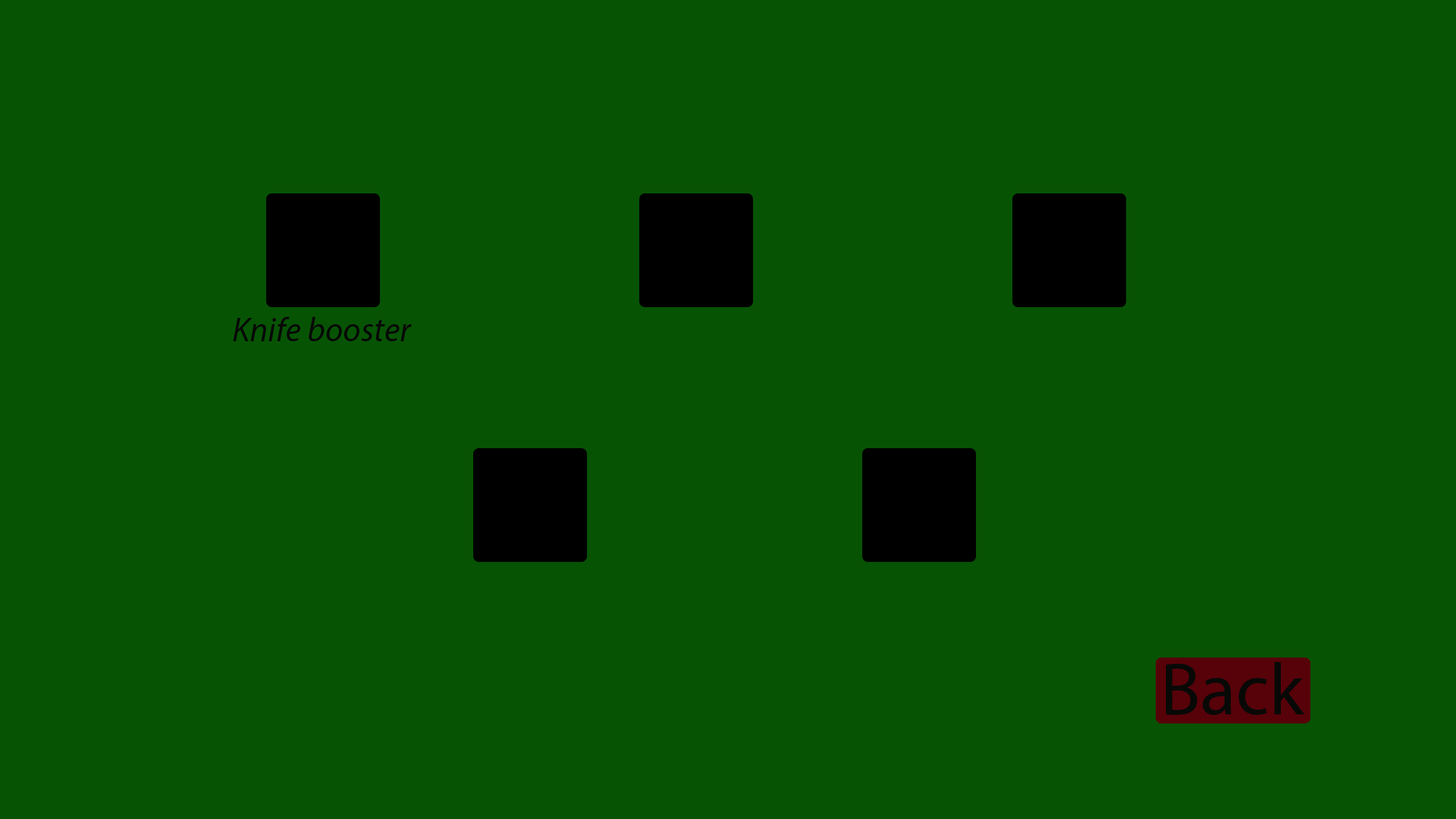
<style>
.page{position:relative;width:1456px;height:819px;background:#075304}
.page>*{position:absolute;margin:0}
.t1{font:34.1px "MyriadPro-It";color:#070907}
.t2{font:73.9px "MyriadPro-Regular";color:#070907}
</style>
<div class="page">
<p class="t1" style="left:233px;top:317px;width:179px;height:24px">Knife booster</p>
<p class="t2" style="left:1166px;top:662px;width:139px;height:53px">Back</p>
</div>
